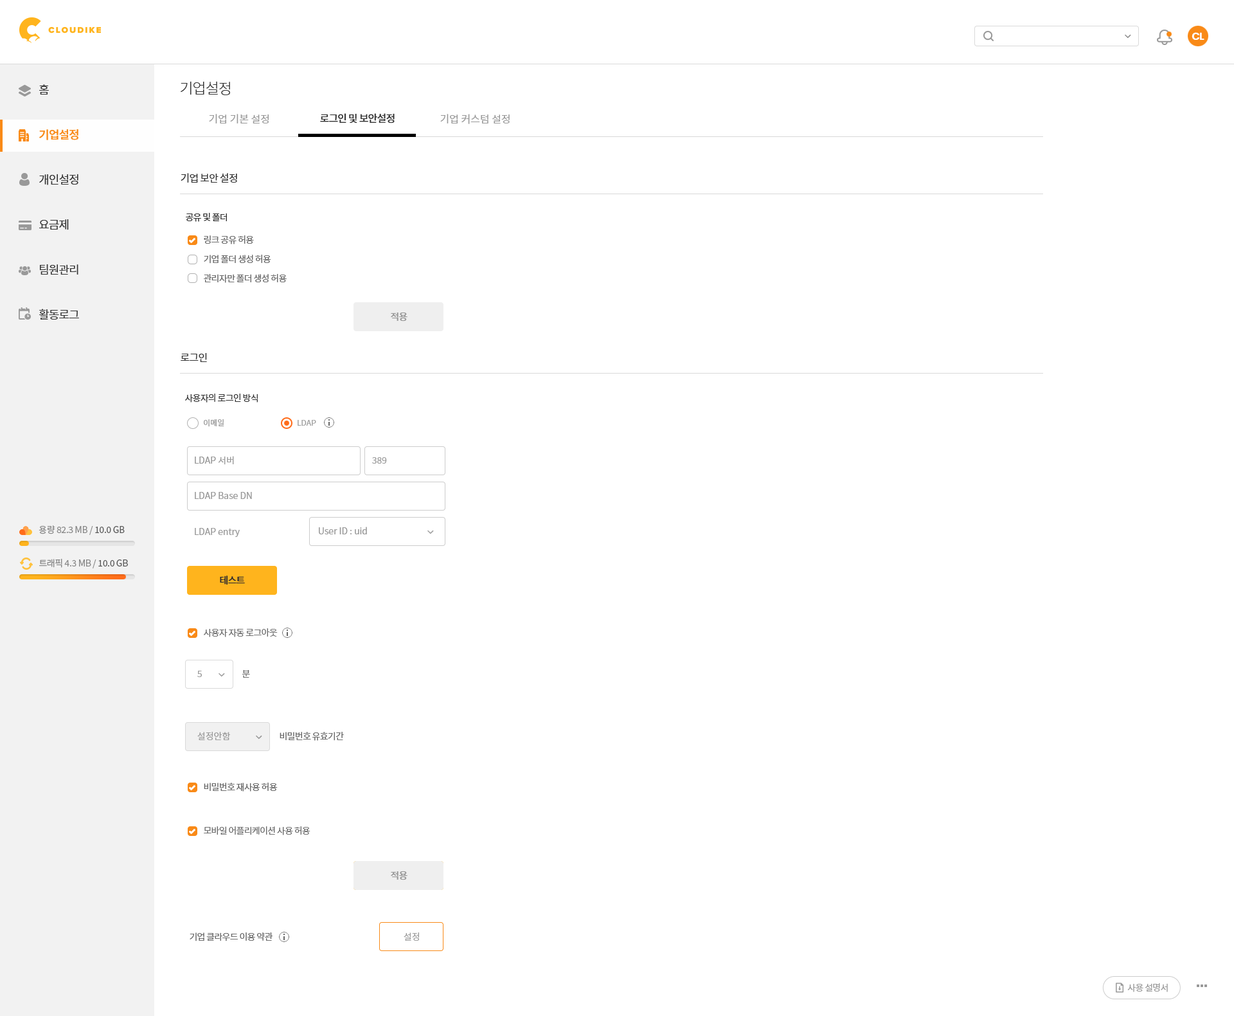
<style>
.page{position:relative;width:1234px;height:1016px;background:#ffffff}
.page>*{position:absolute;margin:0}
.t1{font:10.3px "Poppins-SemiBold";letter-spacing:-0.05em;color:#ffffff}
.t2{font:11.6px/45px "NotoSansCJKkr-DemiLight";letter-spacing:-0.05em;color:#333333}
.t3{font:11.6px/45px "NotoSansCJKkr-Medium";letter-spacing:-0.05em;color:#f98a17}
.t4{font:14.8px "NotoSansCJKkr-Light";letter-spacing:-0.05em;color:#333333}
.t5{font:10.3px "NotoSansCJKkr-DemiLight";color:#999999}
.t6{font:10.3px "NotoSansCJKkr-Medium";letter-spacing:-0.05em;color:#333333}
.t7{font:10.3px "NotoSansCJKkr-Regular";letter-spacing:-0.05em;color:#333333}
.t8{font:9px "NotoSansCJKkr-Regular";letter-spacing:-0.05em;color:#333333}
.t9{font:9px/19.3px "NotoSansCJKkr-DemiLight";letter-spacing:-0.05em;color:#666666}
.t10{font:9.6px "NotoSansCJKkr-Medium";letter-spacing:-0.05em;color:#999999}
.t11{font:7.7px "NotoSansCJKkr-DemiLight";color:#999999}
.t12{font:9px "NotoSansCJKkr-DemiLight";color:#999999}
.t13{font:9px "NotoSansCJKkr-Regular";letter-spacing:-0.025em;color:#888888}
.t14{font:9px "NotoSansCJKkr-Regular";letter-spacing:-0.025em;color:#585858}
.t15{font:9.6px "NotoSansCJKkr-Medium";letter-spacing:-0.05em;color:#2d2d2d}
.t16{font:9px "NotoSansCJKkr-DemiLight";letter-spacing:-0.05em;color:#666666}
.t17{font:9px "NotoSansCJKkr-Regular";letter-spacing:-0.05em;color:#999999}
</style>
<div class="page">
<p class="t1" style="left:1192px;top:32px;width:13px;height:8px">CL</p>
<p class="t2" style="left:39px;top:84px;width:40px;height:236px">홈<br><span class="t3">기업설정<br></span>개인설정<br>요금제<br>팀원관리<br>활동로그</p>
<p class="t4" style="left:181px;top:81px;width:49px;height:14px">기업설정</p>
<p class="t5" style="left:209px;top:114px;width:60px;height:9px">기업 기본 설정</p>
<p class="t6" style="left:320px;top:113px;width:75px;height:10px">로그인 및 보안설정</p>
<p class="t5" style="left:440px;top:114px;width:70px;height:10px">기업 커스텀 설정</p>
<p class="t7" style="left:181px;top:173px;width:56px;height:10px">기업 보안 설정</p>
<p class="t8" style="left:186px;top:213px;width:41px;height:9px">공유 및 폴더</p>
<p class="t9" style="left:204px;top:235px;width:83px;height:48px">링크 공유 허용<br>기업 폴더 생성 허용<br>관리자만 폴더 생성 허용</p>
<p class="t10" style="left:391px;top:312px;width:17px;height:9px">적용</p>
<p class="t7" style="left:181px;top:353px;width:26px;height:9px">로그인</p>
<p class="t8" style="left:185px;top:393px;width:73px;height:9px">사용자의 로그인 방식</p>
<p class="t11" style="left:204px;top:419px;width:20px;height:8px">이메일</p>
<p class="t11" style="left:298px;top:420px;width:18px;height:6px">LDAP</p>
<p class="t12" style="left:195px;top:456px;width:39px;height:9px">LDAP 서버</p>
<p class="t12" style="left:372px;top:457px;width:15px;height:7px">389</p>
<p class="t12" style="left:195px;top:492px;width:57px;height:7px">LDAP Base DN</p>
<p class="t13" style="left:39px;top:525px;width:86px;height:10px">용량 82.3 MB / <span class="t14">10.0 GB</span></p>
<p class="t12" style="left:195px;top:528px;width:45px;height:9px">LDAP entry</p>
<p class="t12" style="left:319px;top:526px;width:48px;height:8px">User ID : uid</p>
<p class="t13" style="left:39px;top:559px;width:89px;height:9px">트래픽 4.3 MB / <span class="t14">10.0 GB</span></p>
<p class="t15" style="left:220px;top:575px;width:25px;height:9px">테스트</p>
<p class="t16" style="left:204px;top:628px;width:74px;height:9px">사용자 자동 로그아웃</p>
<p class="t12" style="left:197px;top:670px;width:5px;height:7px">5</p>
<p class="t16" style="left:242px;top:670px;width:8px;height:8px">분</p>
<p class="t12" style="left:197px;top:732px;width:33px;height:8px">설정안함</p>
<p class="t16" style="left:280px;top:732px;width:64px;height:9px">비밀번호 유효기간</p>
<p class="t16" style="left:204px;top:782px;width:74px;height:9px">비밀번호 재사용 허용</p>
<p class="t16" style="left:204px;top:826px;width:106px;height:9px">모바일 어플리케이션 사용 허용</p>
<p class="t10" style="left:391px;top:870px;width:17px;height:10px">적용</p>
<p class="t10" style="left:391px;top:870px;width:17px;height:10px">적용</p>
<p class="t16" style="left:190px;top:932px;width:83px;height:9px">기업 클라우드 이용 약관</p>
<p class="t12" style="left:404px;top:932px;width:15px;height:9px">설정</p>
<p class="t17" style="left:1128px;top:983px;width:40px;height:9px">사용 설명서</p>
</div>
